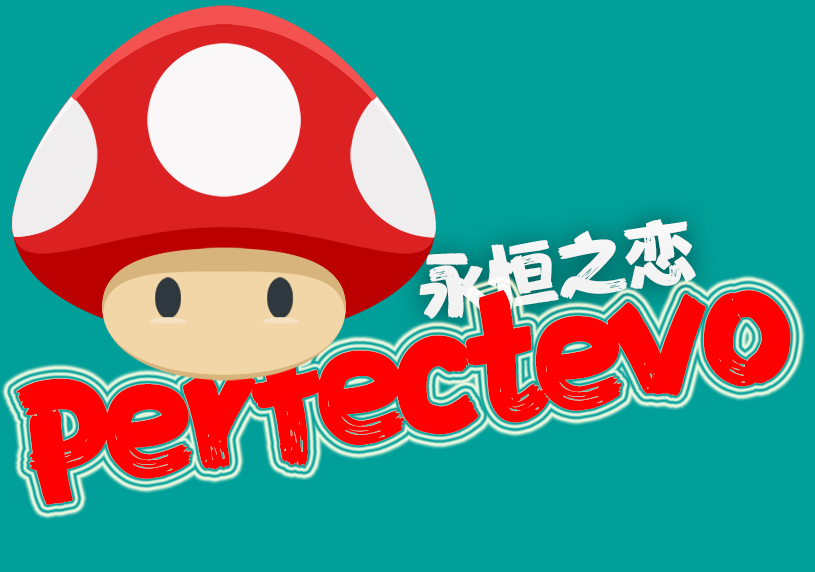
<style>
.page{position:relative;width:815px;height:572px;background:#019f99}
.page>*{position:absolute;margin:0}
.t1{font:69.6px "FZFENSTXJW--GB1-0";color:#ffffff}
.t2{font:151.2px "FZFENSTXJW--GB1-0";letter-spacing:-0.08em;color:#ff0000}
</style>
<div class="page">
<p class="t1" style="left:419px;top:219px;width:277px;height:100px;rotate:-9deg">永恒之恋</p>
<p class="t2" style="left:16px;top:290px;width:775px;height:215px;rotate:-9deg">Perfectevo</p>
</div>
